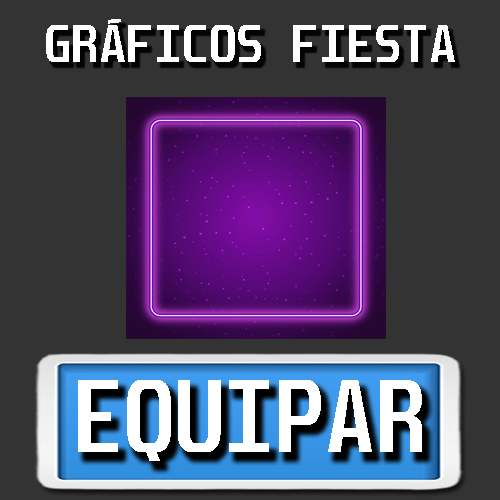
<style>
.page{position:relative;width:500px;height:500px;background:#333333}
.page>*{position:absolute;margin:0}
.t1{font:45px "Unispace-Bold";color:#ffffff}
.t2{font:88.1px "Unispace-Bold";color:#ffffff;scale:0.94 1}
.t3{font:87.7px "Unispace-Bold";color:#ffffff;scale:0.94 1}
</style>
<div class="page">
<p class="t1" style="left:46px;top:19px;width:409px;height:43px">GRÁFICOS FIESTA</p>
<p class="t2" style="left:78px;top:380px;width:344px;height:81px">EQUIPA<span class="t3">R</span></p>
</div>
